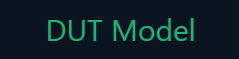
<style>
.page{position:relative;width:239px;height:59px;background:#0a1421}
.page>*{position:absolute;margin:0}
.t1{font:30px "SegoeUISymbol";color:#19b579}
</style>
<div class="page">
<p class="t1" style="left:48px;top:18px;width:146px;height:23px">DUT Model</p>
</div>
